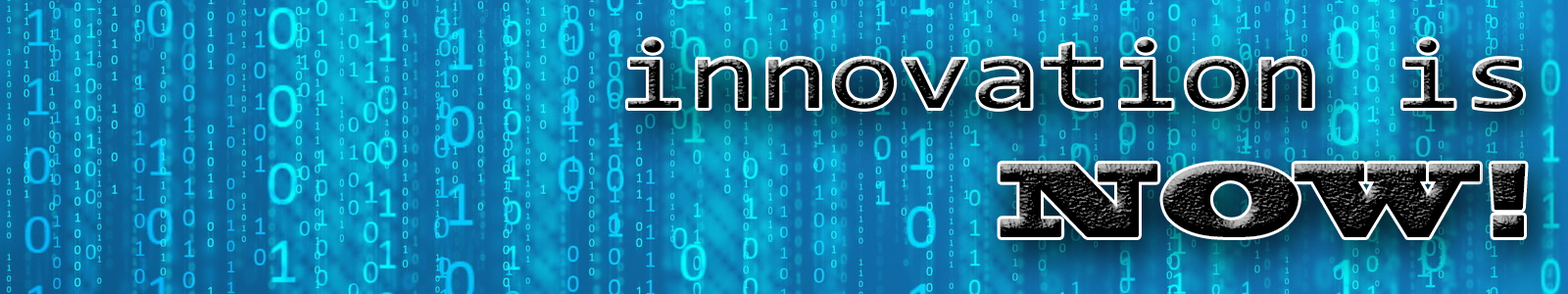
<style>
.page{position:relative;width:1568px;height:294px}
.page>*{position:absolute;margin:0}
.t1{font:97.9px "Consolas";color:#000000;scale:1.31 1}
.t2{font:97.7px "BlackoakStd";color:#000000;scale:0.82 1}
</style>
<div class="page">
<p class="t1" style="left:628px;top:39px;width:896px;height:70px">innovation is</p>
<p class="t2" style="left:1000px;top:164px;width:480px;height:73px">NOW</p>
<p class="t2" style="left:1492px;top:164px;width:34px;height:73px">!</p>
</div>
